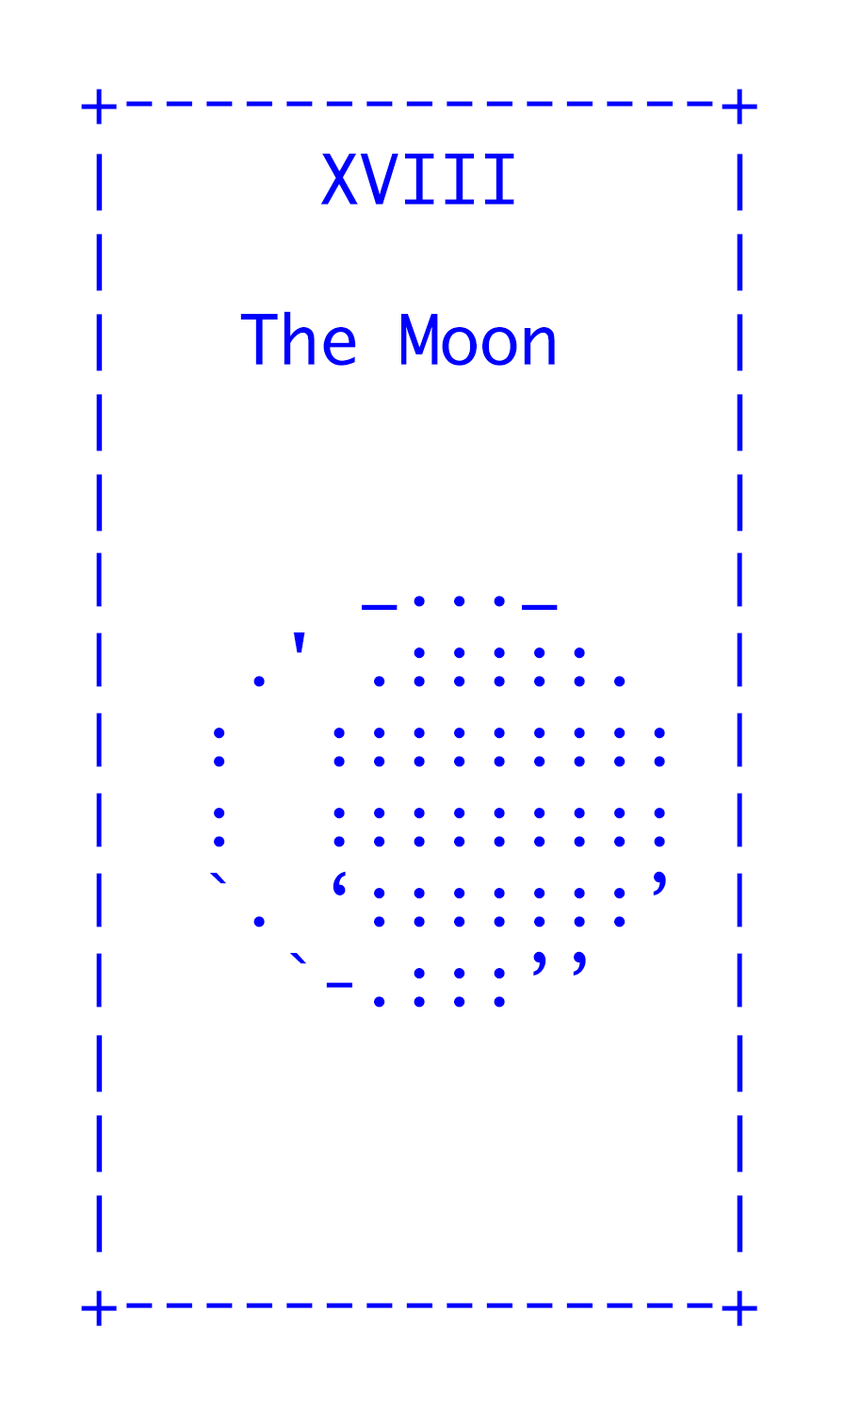
<style>
.page{position:relative;width:845px;height:1411px;background:#ffffff}
.page>*{position:absolute;margin:0}
.t1{font:66.7px "Monaco";color:#0000ff}
</style>
<div class="page">
<p class="t1" style="left:81px;top:89px;width:677px;height:1237px">+---------------+<br>│     XVIII     │<br>│               │<br>│   The Moon    │<br>│               │<br>│               │  <br>|      _..._    |<br>|   .' .:::::.  |  <br>|  :  ::::::::: |   <br>|  :  ::::::::: | <br>|  `. ‘:::::::’ | <br>|    `-.:::’’   |<br>│               │<br>│               │  <br>│               │<br>+---------------+</p>
</div>
